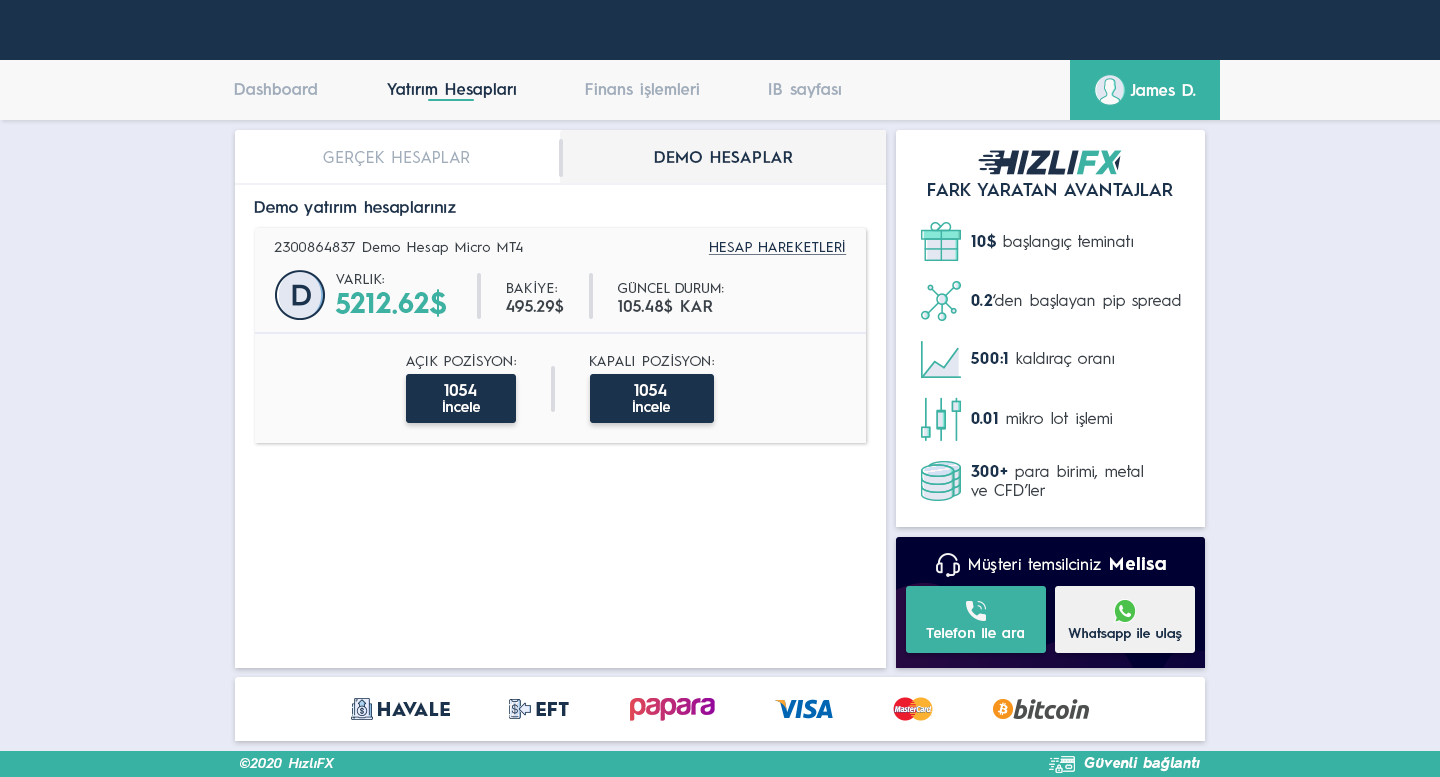
<style>
.page{position:relative;width:1440px;height:777px;background:#ffffff}
.page>*{position:absolute;margin:0}
.t1{font:16px "HurmeGeometricSans3-SemiBold";color:#a1adbb}
.t2{font:16px "HurmeGeometricSans3-SemiBold";color:#1a324c}
.t3{font:16px "HurmeGeometricSans3-SemiBold";color:#fefefe}
.t4{font:16px "HurmeGeometricSans1-Regular";letter-spacing:0.01em;color:#a1adbb}
.t5{font:16px "HurmeGeometricSans1-SemiBold";letter-spacing:0.01em;color:#1a324c}
.t6{font:18px "HurmeGeometricSans1-SemiBold";color:#1a324c}
.t7{font:16px "HurmeGeometricSans3-SemiBold";letter-spacing:0.01em;color:#1a324c}
.t8{font:16px "HurmeGeometricSans1-Regular";color:#3a4149}
.t9{font:16px "HurmeGeometricSans1-Bold";color:#1a324c}
.t10{font:14px "HurmeGeometricSans1-Regular";letter-spacing:0.025em;color:#3a4149}
.t11{font:14px "HurmeGeometricSans1-Regular";letter-spacing:0.01em;color:#1a324c;text-decoration:underline}
.t12{font:14px "HurmeGeometricSans1-Regular";letter-spacing:0.01em;color:#3a4149}
.t13{font:16px "HurmeGeometricSans1-SemiBold";letter-spacing:0.01em;color:#3a4149}
.t14{font:28px "HurmeGeometricSans1-Bold";letter-spacing:0.01em;color:#3db2a3}
.t15{font:13px "HurmeGeometricSans1-Regular";letter-spacing:0.01em;color:#3a4149}
.t16{font:14px "HurmeGeometricSans3-SemiBold";letter-spacing:0.01em;color:#ffffff}
.t17{font:16px "HurmeGeometricSans1-SemiBold";letter-spacing:0.01em;color:#ffffff}
.t18{font:16px "HurmeGeometricSans1-Regular";letter-spacing:0.025em;color:#ffffff}
.t19{font:18px "HurmeGeometricSans1-Bold";letter-spacing:0.05em;color:#ffffff}
.t20{font:13.5px "HurmeGeometricSans3-SemiBold";letter-spacing:0.01em;color:#1a324c}
.t21{font:18px "HurmeGeometricSans1-Black";letter-spacing:0.025em;color:#1a324c}
.t22{font:14px "HurmeGeometricSans2-SemiBoldObl";letter-spacing:0.025em;color:#ffffff}
.t23{font:14px "HurmeGeometricSans2-BoldObl";letter-spacing:0.025em;color:#ffffff}
</style>
<div class="page">
<p class="t1" style="left:234px;top:83px;width:83px;height:12px">Dashboard</p>
<p class="t2" style="left:387px;top:83px;width:129px;height:15px">Yatırım Hesapları</p>
<p class="t1" style="left:585px;top:83px;width:114px;height:15px">Finans işlemleri</p>
<p class="t1" style="left:769px;top:83px;width:72px;height:15px">IB sayfası</p>
<p class="t3" style="left:1130px;top:84px;width:66px;height:12px">James D.</p>
<p class="t4" style="left:323px;top:151px;width:147px;height:15px">GERÇEK HESAPLAR</p>
<p class="t5" style="left:654px;top:151px;width:139px;height:12px">DEMO HESAPLAR</p>
<p class="t6" style="left:928px;top:183px;width:245px;height:13px">FARK YARATAN AVANTAJLAR</p>
<p class="t7" style="left:254px;top:201px;width:202px;height:15px">Demo yatırım hesaplarınız</p>
<p class="t8" style="left:971px;top:233px;width:162px;height:17px"><span class="t9">10$</span> başlangıç teminatı</p>
<p class="t10" style="left:274px;top:242px;width:249px;height:13px">2300864837 Demo Hesap Micro MT4</p>
<p class="t11" style="left:708px;top:240px;width:139px;height:15px">HESAP HAREKETLERİ</p>
<p class="t12" style="left:336px;top:274px;width:48px;height:10px">VARLIK:</p>
<p class="t12" style="left:506px;top:281px;width:58px;height:33px">BAKİYE:<br><span class="t13">495.29$</span></p>
<p class="t14" style="left:335px;top:289px;width:111px;height:28px">5212.62$</p>
<p class="t15" style="left:618px;top:282px;width:106px;height:32px">GÜNCEL DURUM:<br><span class="t13">105.48$ KAR</span></p>
<p class="t8" style="left:971px;top:294px;width:210px;height:15px"><span class="t9">0.2</span>‘den başlayan pip spread</p>
<p class="t8" style="left:970px;top:352px;width:144px;height:15px"><span class="t9">500:1</span> kaldıraç oranı</p>
<p class="t12" style="left:406px;top:354px;width:110px;height:15px">AÇIK POZİSYON:</p>
<p class="t12" style="left:590px;top:354px;width:124px;height:12px">KAPALI POZİSYON:</p>
<p class="t16" style="left:443px;top:384px;width:37px;height:28px;text-align:center"><span class="t17">1054<br></span>İncele</p>
<p class="t16" style="left:633px;top:384px;width:37px;height:28px;text-align:center"><span class="t17">1054<br></span>İncele</p>
<p class="t8" style="left:971px;top:412px;width:141px;height:15px"><span class="t9">0.01</span> mikro lot işlemi</p>
<p class="t8" style="left:971px;top:465px;width:172px;height:32px"><span class="t9">300+</span> para birimi, metal<br>ve CFD’ler</p>
<p class="t18" style="left:969px;top:557px;width:197px;height:16px">Müşteri temsilciniz <span class="t19">Melisa</span></p>
<p class="t16" style="left:926px;top:628px;width:98px;height:10px">Telefon ile ara</p>
<p class="t20" style="left:1068px;top:628px;width:114px;height:13px">Whatsapp ile ulaş</p>
<p class="t21" style="left:378px;top:702px;width:72px;height:14px">HAVALE</p>
<p class="t21" style="left:536px;top:702px;width:33px;height:14px">EFT</p>
<p class="t22" style="left:240px;top:758px;width:95px;height:10px">©2020 HızlıFX</p>
<p class="t23" style="left:1084px;top:757px;width:116px;height:15px">Güvenli bağlantı</p>
</div>
